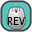
<style>
.page{position:relative;width:32px;height:32px}
.page>*{position:absolute;margin:0}
.t1{font:10px "LucidaSans-Typewriter";color:#000000}
</style>
<div class="page">
<p class="t1" style="left:7px;top:17px;width:18px;height:8px">REV</p>
</div>
